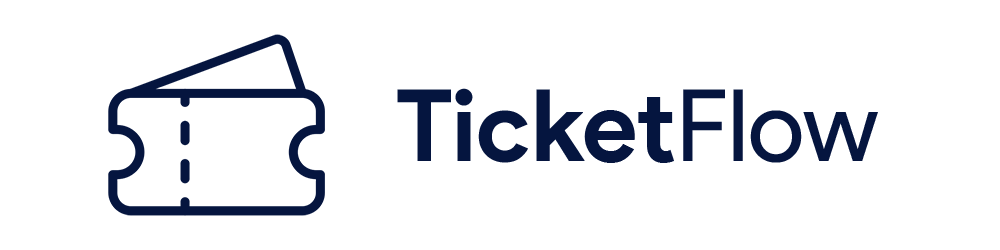
<style>
.page{position:relative;width:1000px;height:250px;background:#ffffff}
.page>*{position:absolute;margin:0}
.t1{font:100px "ProductSans-Bold";color:#05153f}
.t2{font:100px "ProductSans-Regular";color:#05153f}
</style>
<div class="page">
<p class="t1" style="left:397px;top:88px;width:481px;height:75px">Ticket<span class="t2">Flow</span></p>
</div>
